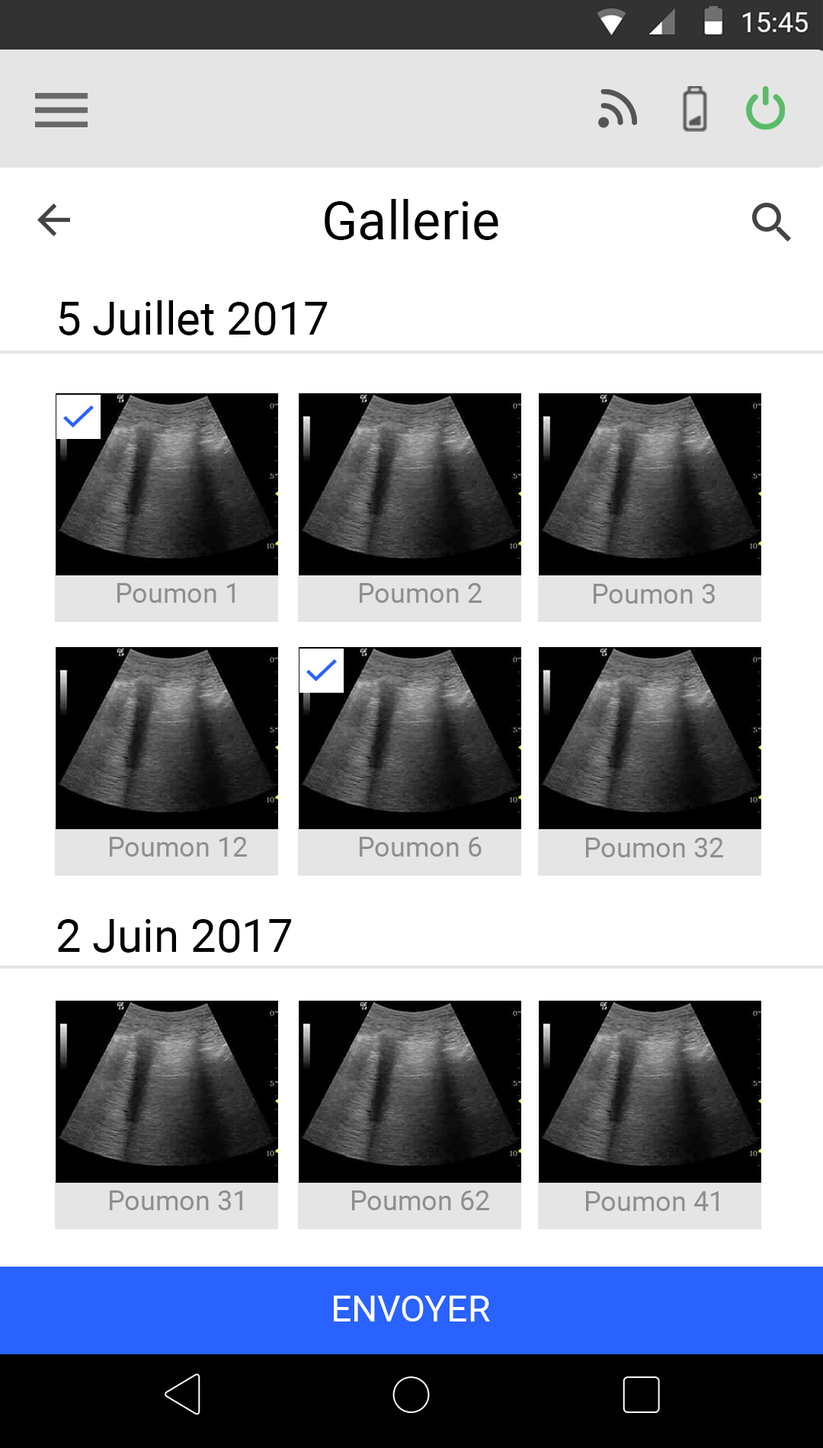
<style>
.page{position:relative;width:823px;height:1448px;background:#ffffff}
.page>*{position:absolute;margin:0}
.t1{font:53.4px "Roboto-Regular";color:#000000}
.t2{font:45.7px "Roboto-Regular";color:#000000}
.t3{font:27.4px "Roboto-Regular";color:#8e8e8f}
.t4{font:36.6px "Roboto-Regular";color:#fffefe}
</style>
<div class="page">
<p class="t1" style="left:325px;top:199px;width:174px;height:41px">Gallerie</p>
<p class="t2" style="left:59px;top:300px;width:269px;height:35px">5 Juillet 2017</p>
<p class="t3" style="left:117px;top:583px;width:118px;height:20px">Poumon 1</p>
<p class="t3" style="left:360px;top:583px;width:122px;height:20px">Poumon 2</p>
<p class="t3" style="left:594px;top:584px;width:121px;height:20px">Poumon 3</p>
<p class="t3" style="left:110px;top:837px;width:137px;height:20px">Poumon 12</p>
<p class="t3" style="left:360px;top:837px;width:122px;height:20px">Poumon 6</p>
<p class="t3" style="left:586px;top:838px;width:137px;height:20px">Poumon 32</p>
<p class="t2" style="left:57px;top:919px;width:235px;height:34px">2 Juin 2017</p>
<p class="t3" style="left:110px;top:1191px;width:132px;height:20px">Poumon 31</p>
<p class="t3" style="left:352px;top:1191px;width:137px;height:20px">Poumon 62</p>
<p class="t3" style="left:586px;top:1191px;width:133px;height:20px">Poumon 41</p>
<p class="t4" style="left:334px;top:1296px;width:156px;height:26px">ENVOYER</p>
</div>
